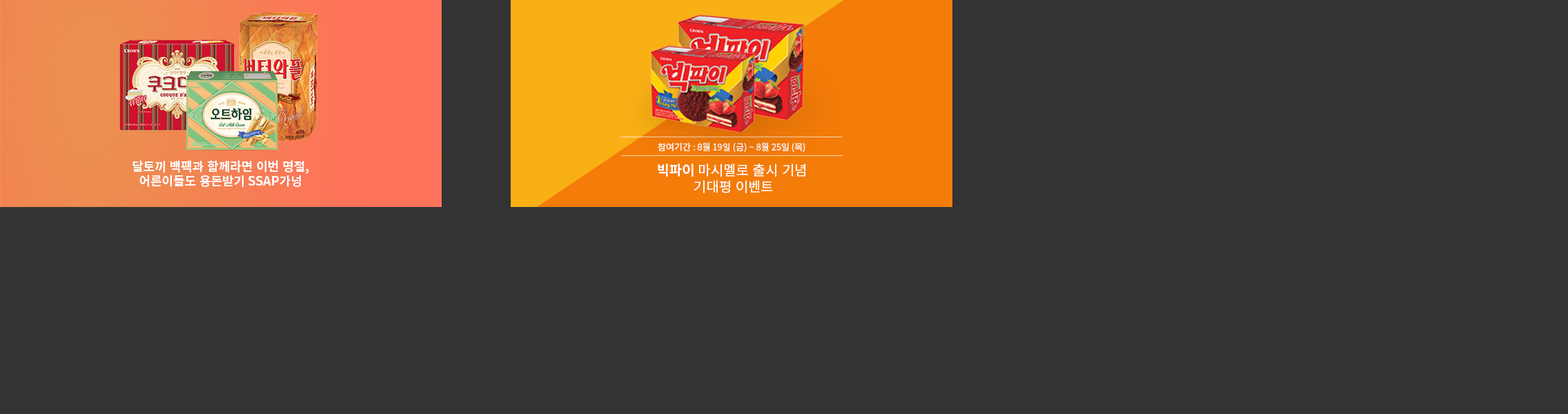
<style>
.page{position:relative;width:1568px;height:414px;background:#333333}
.page>*{position:absolute;margin:0}
.t1{font:9px "NotoSansKR-Regular";color:#ffffff}
.t2{font:12.4px "NotoSansKR-Bold";color:#ffffff}
.t3{font:13.8px "NotoSansKR-Regular";color:#ffffff}
.t4{font:13.8px "NotoSansKR-Bold";color:#ffffff}
</style>
<div class="page">
<p class="t1" style="left:658px;top:142px;width:147px;height:11px">참여기간 : 8월 19일 (금) ~ 8월 25일 (목)</p>
<p class="t2" style="left:133px;top:160px;width:175px;height:27px;text-align:center">달토끼 백팩과 함께라면 이번 명절,<br>어른이들도 용돈받기 SSAP가넝</p>
<p class="t3" style="left:658px;top:164px;width:147px;height:29px;text-align:center"><span class="t4">빅파이 </span>마시멜로 출시 기념 <br>기대평 이벤트</p>
</div>
